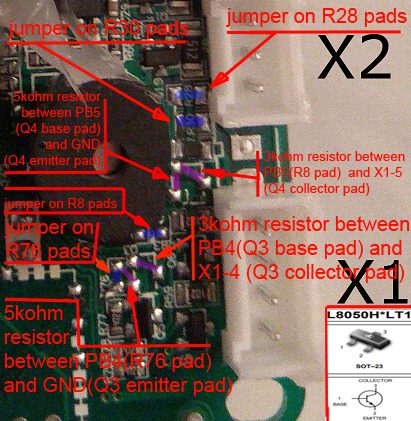
<style>
.page{position:relative;width:411px;height:421px}
.page>*{position:absolute;margin:0}
.t1{font:20px "ArialMT";color:#ff0c00}
.t2{font:13.3px "ArialMT";color:#ff0c00}
</style>
<div class="page">
<p class="t1" style="left:226px;top:8px;width:181px;height:19px">jumper on R28 pads</p>
<p class="t1" style="left:8px;top:20px;width:181px;height:19px">jumper on R30 pads</p>
<p class="t2" style="left:4px;top:91px;width:97px;height:77px;text-align:right">5kohm resistor<br>between PB5<br>(Q4 base pad)<br>and GND<br>(Q4 emitter pad)</p>
<p class="t2" style="left:264px;top:151px;width:141px;height:45px">3kohm resistor between<br>PB5(R8 pad)  and X1-5 <br>(Q4 collector pad)</p>
<p class="t2" style="left:3px;top:198px;width:114px;height:13px">jumper on R8 pads</p>
<p class="t1" style="left:4px;top:219px;width:89px;height:43px">jumper on <br>R76 pads</p>
<p class="t1" style="left:198px;top:216px;width:212px;height:67px">3kohm resistor between<br>PB4(Q3 base pad) and<br>X1-4 (Q3 collector pad)</p>
<p class="t1" style="left:4px;top:305px;width:228px;height:91px">5kohm <br>resistor<br>between PB4(R76 pad)<br>and GND(Q3 emitter pad)</p>
</div>
